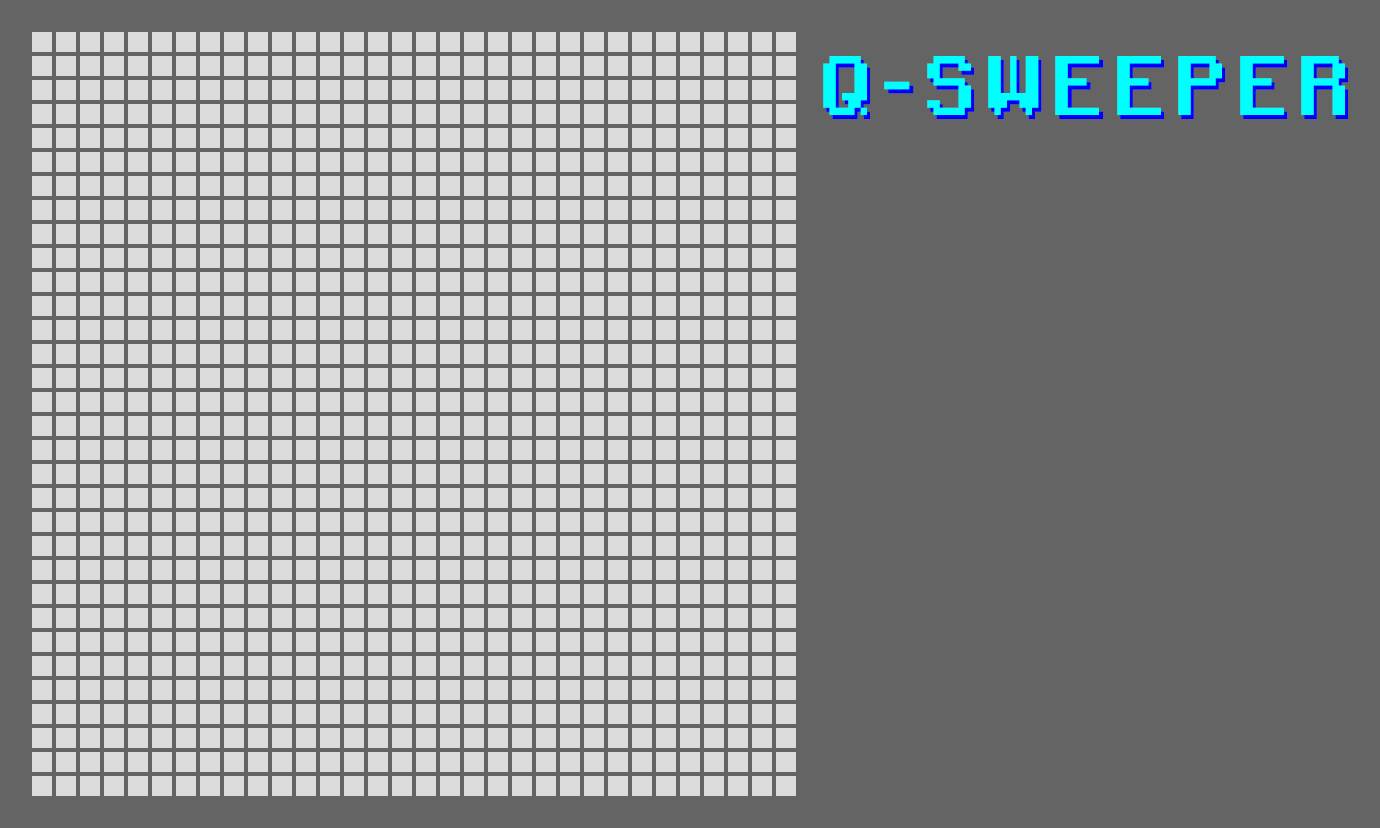
<style>
.page{position:relative;width:1380px;height:828px;background:#646464}
.page>*{position:absolute;margin:0}
.t1{font:81px "RetroGaming";letter-spacing:0.12em;color:#00ffff;text-transform:uppercase;scale:0.85 1}
.t2{font:81px "RetroGaming";letter-spacing:0.12em;text-transform:uppercase;scale:0.85 1}
</style>
<div class="page">
<p class="t1" style="left:823px;top:56px;width:522px;height:59px">Q-Sweeper</p>
<p class="t2" style="left:826px;top:60px;width:522px;height:59px">Q-Sweeper</p>
</div>
